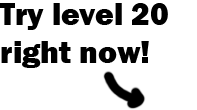
<style>
.page{position:relative;width:197px;height:110px;background:#ffffff}
.page>*{position:absolute;margin:0}
.t1{font:32px "FranklinGothic-Heavy";color:#000000}
</style>
<div class="page">
<p class="t1" style="left:0px;top:3px;width:168px;height:65px">Try level 20<br>right now!</p>
</div>
